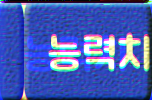
<style>
.page{position:relative;width:152px;height:100px}
.page>*{position:absolute;margin:0}
.t1{font:43.4px "BMJUA"}
</style>
<div class="page">
<p class="t1" style="left:24px;top:32px;width:102px;height:38px">능력치</p>
</div>
